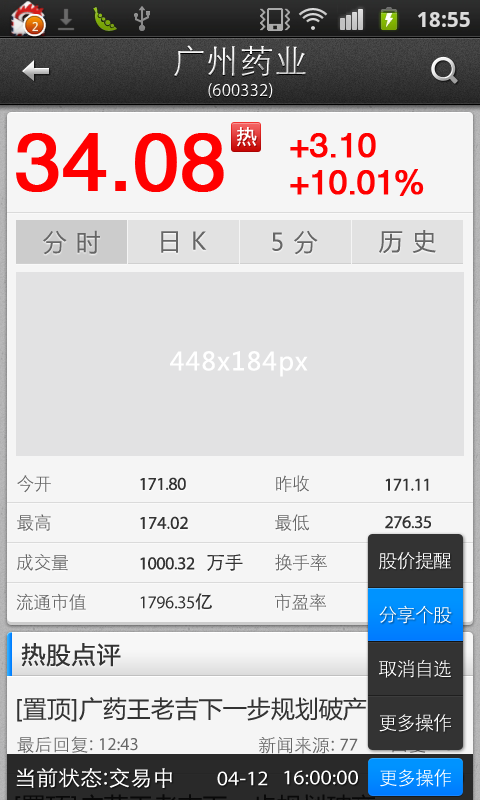
<style>
.page{position:relative;width:480px;height:800px;background:#f5f5f5}
.page>*{position:absolute;margin:0}
.t1{font:34px "STXihei";letter-spacing:0.005em;color:#ffffff}
.t2{font:18px "HelveticaCE-Regular";letter-spacing:0.005em;color:#ffffff}
.t3{font:82px "HelveticaCE-Regular";letter-spacing:-0.01em;color:#ff0000;font-weight:bold}
.t4{font:20px "MicrosoftYaHei";letter-spacing:0.05em;color:#ffffff}
.t5{font:34px "HelveticaCE-Regular";letter-spacing:-0.025em;color:#ff0000;font-weight:bold}
.t6{font:24px "MicrosoftYaHei";letter-spacing:0.05em;color:#666666}
.t7{font:24.8px "MicrosoftYaHei";letter-spacing:0.05em;color:#ffffff}
.t8{font:18px "STXihei";letter-spacing:-0.025em;color:#666666}
.t9{font:18px "HelveticaCE-Regular";letter-spacing:-0.025em;color:#333333}
.t10{font:18px "HelveticaCE-Regular";color:#333333}
.t11{font:18.8px "STXihei";letter-spacing:-0.025em;color:#333333}
.t12{font:19px "STXihei";letter-spacing:-0.04em;color:#ffffff}
.t13{font:18px "AdobeHeitiStd-Regular";letter-spacing:-0.025em;color:#333333}
.t14{font:24px "MicrosoftYaHei";letter-spacing:0.05em;color:#333333}
.t15{font:24px "MicrosoftYaHei";color:#333333}
.t16{font:18px "STXihei";color:#666666}
.t17{font:18px "HelveticaCE-Regular";color:#666666}
.t18{font:18px "HelveticaCE-Regular";color:#1e64ab}
.t19{font:20.9px "STXihei";color:#ffffff;scale:1.05 1}
.t20{font:20.9px "HelveticaCE-Regular";color:#ffffff;scale:1.05 1}
.t21{font:18.8px "STXihei";letter-spacing:-0.04em;color:#ffffff}
</style>
<div class="page">
<p class="t1" style="left:174px;top:45px;width:132px;height:32px">广州药业</p>
<p class="t2" style="left:208px;top:83px;width:65px;height:15px">(600332)</p>
<p class="t3" style="left:16px;top:133px;width:208px;height:59px">34.08</p>
<p class="t4" style="left:237px;top:127px;width:20px;height:20px">热</p>
<p class="t5" style="left:290px;top:133px;width:86px;height:25px">+3.10</p>
<p class="t5" style="left:290px;top:169px;width:134px;height:27px">+10.01%</p>
<p class="t6" style="left:43px;top:230px;width:57px;height:25px">分 时</p>
<p class="t6" style="left:43px;top:230px;width:57px;height:25px">分 时</p>
<p class="t6" style="left:161px;top:231px;width:46px;height:22px">日 K</p>
<p class="t6" style="left:272px;top:230px;width:46px;height:25px">5 分</p>
<p class="t6" style="left:379px;top:230px;width:57px;height:24px">历 史</p>
<p class="t7" style="left:170px;top:351px;width:138px;height:26px">448x184px</p>
<p class="t8" style="left:17px;top:475px;width:34px;height:18px">今开</p>
<p class="t9" style="left:140px;top:477px;width:46px;height:13px">171.80</p>
<p class="t8" style="left:276px;top:475px;width:33px;height:17px">昨收</p>
<p class="t9" style="left:385px;top:478px;width:44px;height:13px">171.11</p>
<p class="t8" style="left:17px;top:514px;width:34px;height:17px">最高</p>
<p class="t10" style="left:140px;top:516px;width:48px;height:13px">174.02</p>
<p class="t8" style="left:275px;top:514px;width:34px;height:17px">最低</p>
<p class="t9" style="left:385px;top:516px;width:46px;height:13px">276.35</p>
<p class="t8" style="left:17px;top:554px;width:51px;height:17px">成交量</p>
<p class="t9" style="left:140px;top:557px;width:55px;height:13px">1000.32</p>
<p class="t11" style="left:207px;top:554px;width:36px;height:17px">万手</p>
<p class="t8" style="left:275px;top:554px;width:52px;height:17px">换手率</p>
<p class="t12" style="left:379px;top:551px;width:72px;height:19px">股价提醒</p>
<p class="t8" style="left:16px;top:593px;width:70px;height:18px">流通市值</p>
<p class="t9" style="left:140px;top:593px;width:72px;height:17px">1796.35<span class="t13">亿</span></p>
<p class="t8" style="left:275px;top:593px;width:51px;height:18px">市盈率</p>
<p class="t12" style="left:379px;top:605px;width:73px;height:19px">分享个股</p>
<p class="t14" style="left:21px;top:643px;width:100px;height:24px">热股点评</p>
<p class="t12" style="left:379px;top:659px;width:72px;height:19px">取消自选</p>
<p class="t15" style="left:17px;top:697px;width:350px;height:25px">[置顶]广药王老吉下一步规划破产</p>
<p class="t12" style="left:379px;top:714px;width:72px;height:18px">更多操作</p>
<p class="t16" style="left:17px;top:736px;width:121px;height:17px">最后回复: <span class="t17">12:43</span></p>
<p class="t16" style="left:259px;top:736px;width:99px;height:18px">新闻来源: <span class="t18">77</span></p>
<p class="t19" style="left:16px;top:768px;width:156px;height:20px">当前状态:交易中</p>
<p class="t20" style="left:217px;top:771px;width:51px;height:15px">04-12</p>
<p class="t20" style="left:284px;top:770px;width:74px;height:15px">16:00:00</p>
<p class="t21" style="left:380px;top:769px;width:71px;height:18px">更多操作</p>
</div>
